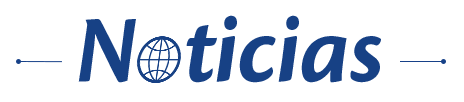
<style>
.page{position:relative;width:464px;height:102px;background:#ffffff}
.page>*{position:absolute;margin:0}
.t1{font:99.1px "CronosPro-BoldSubhIt";color:#174185}
</style>
<div class="page">
<p class="t1" style="left:78px;top:15px;width:303px;height:68px">N  ticias</p>
</div>
